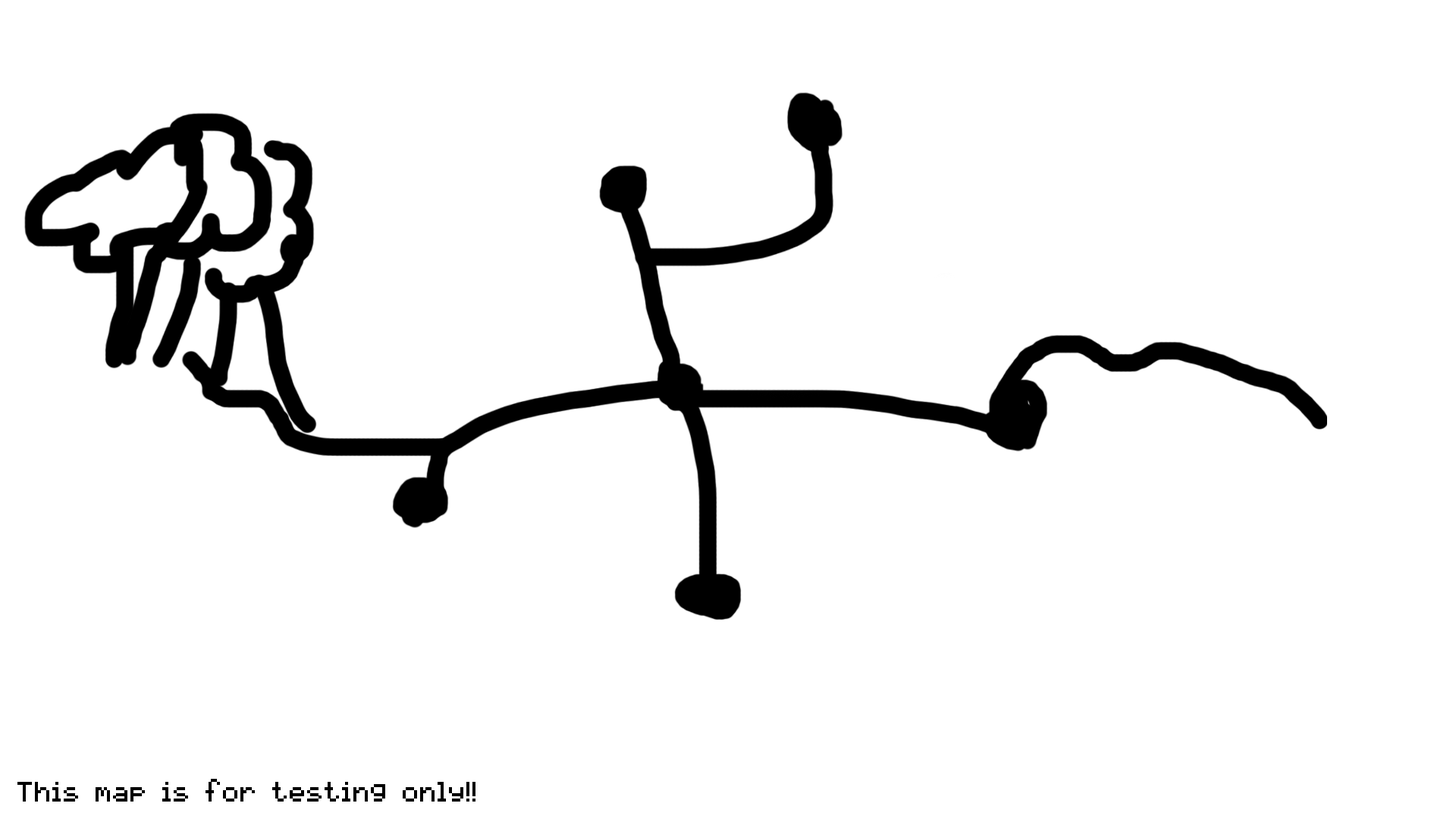
<style>
.page{position:relative;width:1456px;height:819px;background:#ffffff}
.page>*{position:absolute;margin:0}
.t1{font:22.7px "pixelmix";color:#000000}
</style>
<div class="page">
<p class="t1" style="left:17px;top:779px;width:458px;height:23px">This map is for testing only!!</p>
</div>
